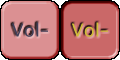
<style>
.page{position:relative;width:120px;height:60px;background:#db9092}
.page>*{position:absolute;margin:0}
.t1{font:18px "LucidaSans";color:#414058}
.t2{font:18px "LucidaSans";color:#cebe38}
</style>
<div class="page">
<p class="t1" style="left:12px;top:22px;width:36px;height:15px">Vol–</p>
<p class="t2" style="left:72px;top:22px;width:36px;height:15px">Vol–</p>
</div>
